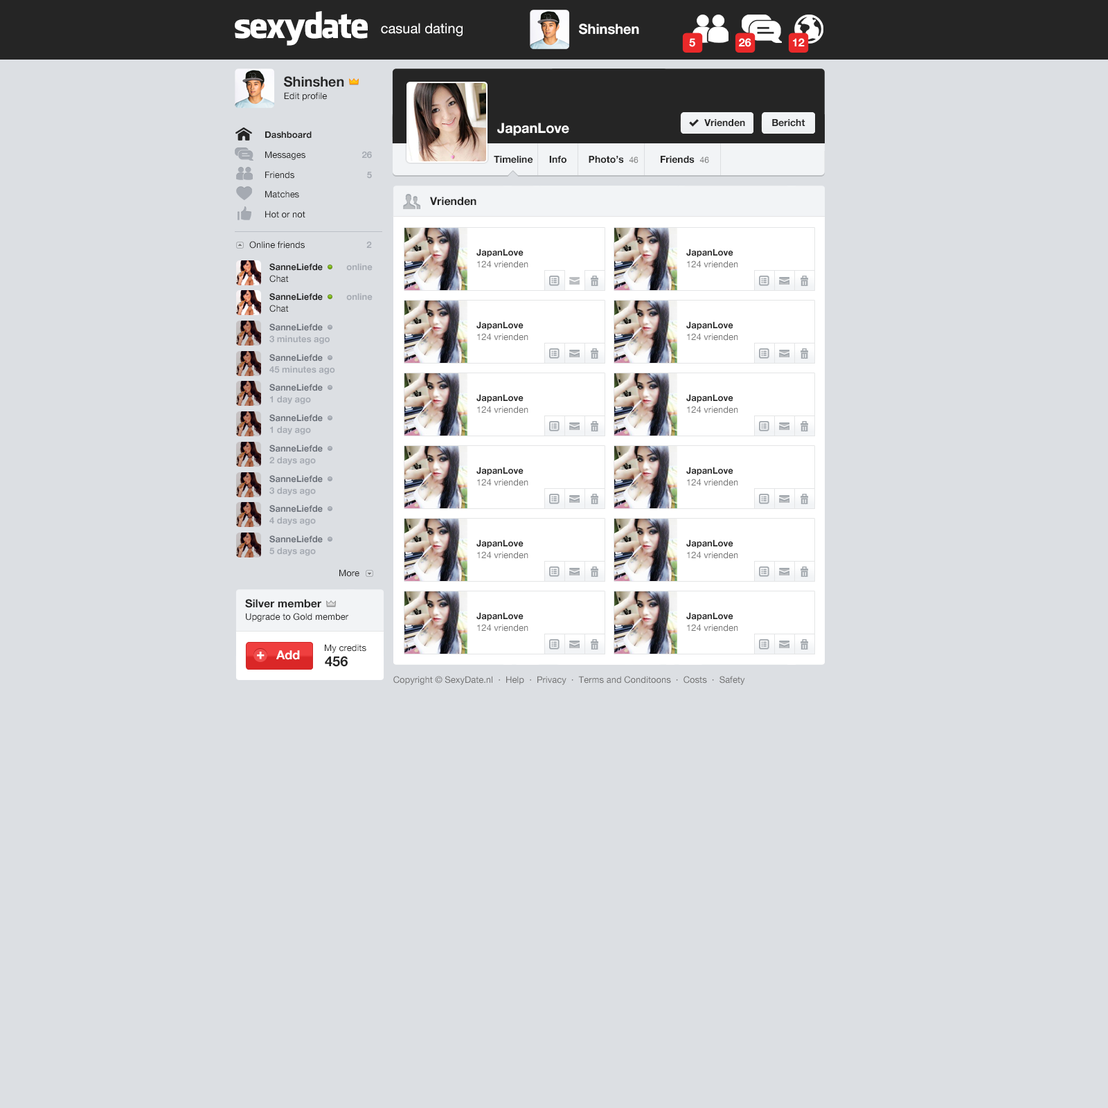
<style>
.page{position:relative;width:1108px;height:1108px;background:#dcdfe3}
.page>*{position:absolute;margin:0}
.t1{font:34.6px "FacebookLetterFaces";letter-spacing:-0.05em;color:#ffffff}
.t2{font:13.8px "HelveticaNeue";color:#ffffff}
.t3{font:13.8px "HelveticaNeue-Bold";color:#ffffff}
.t4{font:11.1px "HelveticaNeue-Bold";color:#ffffff}
.t5{font:13.8px "HelveticaNeue-Bold";color:#252525}
.t6{font:9px "HelveticaNeue";color:#252525}
.t7{font:9.7px "HelveticaNeue-Bold";color:#252525}
.t8{font:9px/20px "HelveticaNeue";color:#252525}
.t9{font:9px/20px "HelveticaNeue-Bold";color:#252525}
.t10{font:9px/20px "HelveticaNeue-Bold";color:#a5aab2}
.t11{font:8.3px "HelveticaNeue";color:#737373}
.t12{font:11.1px "HelveticaNeue-Bold";color:#252525}
.t13{font:9px "HelveticaNeue-Bold";color:#a5aab2}
.t14{font:9px/11.8px "HelveticaNeue";color:#737373}
.t15{font:9px/11.8px "HelveticaNeue-Bold";color:#252525}
.t16{font:9px/11.8px "HelveticaNeue-Bold";color:#a5aab2}
.t17{font:9px/11.8px "HelveticaNeue";color:#252525}
.t18{font:9px/11.8px "HelveticaNeue-Bold";color:#6d727b}
.t19{font:13.2px "HelveticaNeue-Bold";color:#ffffff;font-weight:bold}
.t20{font:12.5px "HelveticaNeue-Bold";color:#ffffff}
.t21{font:9px "HelveticaNeue";color:#707070}
</style>
<div class="page">
<p class="t1" style="left:235px;top:11px;width:133px;height:35px">sexydate</p>
<p class="t2" style="left:381px;top:23px;width:81px;height:14px">casual dating</p>
<p class="t3" style="left:579px;top:24px;width:60px;height:11px">Shinshen</p>
<p class="t4" style="left:689px;top:38px;width:6px;height:9px">5</p>
<p class="t4" style="left:739px;top:38px;width:12px;height:9px">26</p>
<p class="t4" style="left:793px;top:38px;width:11px;height:8px">12</p>
<p class="t5" style="left:284px;top:76px;width:60px;height:11px">Shinshen</p>
<p class="t6" style="left:284px;top:92px;width:43px;height:9px">Edit profile</p>
<p class="t3" style="left:497px;top:123px;width:72px;height:13px">JapanLove</p>
<p class="t7" style="left:704px;top:119px;width:41px;height:8px">Vrienden</p>
<p class="t7" style="left:772px;top:119px;width:33px;height:8px">Bericht</p>
<p class="t8" style="left:265px;top:131px;width:47px;height:87px"><span class="t9">Dashboard<br></span>Messages<br>Friends<br>Matches<br>Hot or not</p>
<p class="t10" style="left:362px;top:151px;width:10px;height:28px;text-align:right">26<br>5</p>
<p class="t7" style="left:494px;top:156px;width:215px;height:7px">Timeline      Info        Photo’s  <span class="t11">46</span>        Friends  <span class="t11">46</span></p>
<p class="t12" style="left:430px;top:197px;width:46px;height:9px">Vrienden</p>
<p class="t6" style="left:249px;top:241px;width:123px;height:8px">Online friends      <span class="t13">2</span></p>
<p class="t14" style="left:476px;top:249px;width:52px;height:19px"><span class="t15">JapanLove<br></span>124 vrienden</p>
<p class="t14" style="left:686px;top:249px;width:52px;height:19px"><span class="t15">JapanLove<br></span>124 vrienden</p>
<p class="t15" style="left:269px;top:263px;width:103px;height:19px">SanneLiefde          <span class="t16">online<br></span><span class="t17">Chat</span></p>
<p class="t15" style="left:269px;top:293px;width:103px;height:19px">SanneLiefde          <span class="t16">online<br></span><span class="t17">Chat</span></p>
<p class="t16" style="left:269px;top:323px;width:61px;height:21px"><span class="t18">SanneLiefde<br></span>3 minutes ago</p>
<p class="t14" style="left:476px;top:321px;width:52px;height:20px"><span class="t15">JapanLove<br></span>124 vrienden</p>
<p class="t14" style="left:686px;top:321px;width:52px;height:20px"><span class="t15">JapanLove<br></span>124 vrienden</p>
<p class="t16" style="left:269px;top:354px;width:66px;height:21px"><span class="t18">SanneLiefde<br></span>45 minutes ago</p>
<p class="t18" style="left:269px;top:384px;width:54px;height:20px">SanneLiefde<br><span class="t16">1 day ago</span></p>
<p class="t14" style="left:476px;top:394px;width:52px;height:19px"><span class="t15">JapanLove<br></span>124 vrienden</p>
<p class="t14" style="left:686px;top:394px;width:52px;height:19px"><span class="t15">JapanLove<br></span>124 vrienden</p>
<p class="t18" style="left:269px;top:414px;width:54px;height:21px">SanneLiefde<br><span class="t16">1 day ago</span></p>
<p class="t18" style="left:269px;top:444px;width:54px;height:21px">SanneLiefde<br><span class="t16">2 days ago</span></p>
<p class="t14" style="left:476px;top:467px;width:52px;height:19px"><span class="t15">JapanLove<br></span>124 vrienden</p>
<p class="t14" style="left:686px;top:467px;width:52px;height:19px"><span class="t15">JapanLove<br></span>124 vrienden</p>
<p class="t18" style="left:269px;top:475px;width:54px;height:21px">SanneLiefde<br><span class="t16">3 days ago</span></p>
<p class="t18" style="left:269px;top:505px;width:54px;height:20px">SanneLiefde<br><span class="t16">4 days ago</span></p>
<p class="t18" style="left:269px;top:535px;width:54px;height:21px">SanneLiefde<br><span class="t16">5 days ago</span></p>
<p class="t14" style="left:476px;top:539px;width:52px;height:20px"><span class="t15">JapanLove<br></span>124 vrienden</p>
<p class="t14" style="left:686px;top:539px;width:52px;height:20px"><span class="t15">JapanLove<br></span>124 vrienden</p>
<p class="t6" style="left:339px;top:569px;width:20px;height:8px">More</p>
<p class="t12" style="left:245px;top:599px;width:76px;height:9px">Silver member</p>
<p class="t6" style="left:246px;top:613px;width:102px;height:9px">Upgrade to Gold member</p>
<p class="t14" style="left:476px;top:612px;width:52px;height:19px"><span class="t15">JapanLove<br></span>124 vrienden</p>
<p class="t14" style="left:686px;top:612px;width:52px;height:19px"><span class="t15">JapanLove<br></span>124 vrienden</p>
<p class="t19" style="left:257px;top:651px;width:7px;height:8px">+</p>
<p class="t20" style="left:276px;top:650px;width:24px;height:10px">Add</p>
<p class="t6" style="left:325px;top:644px;width:41px;height:9px">My credits</p>
<p class="t5" style="left:325px;top:656px;width:23px;height:11px">456</p>
<p class="t21" style="left:393px;top:676px;width:352px;height:9px">Copyright © SexyDate.nl  ·  Help  ·  Privacy  ·  Terms and Conditoons  ·  Costs  ·  Safety</p>
</div>
